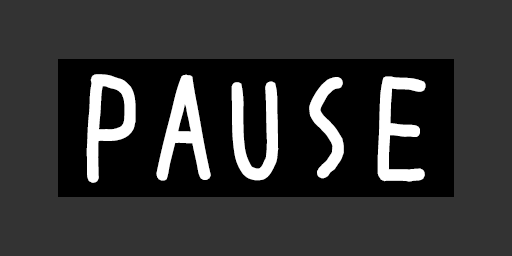
<style>
.page{position:relative;width:512px;height:256px;background:#333333}
.page>*{position:absolute;margin:0}
.t1{font:150px "uzura_font";color:#ffffff;scale:0.97 1}
</style>
<div class="page">
<p class="t1" style="left:86px;top:74px;width:340px;height:109px">PAUSE</p>
</div>
